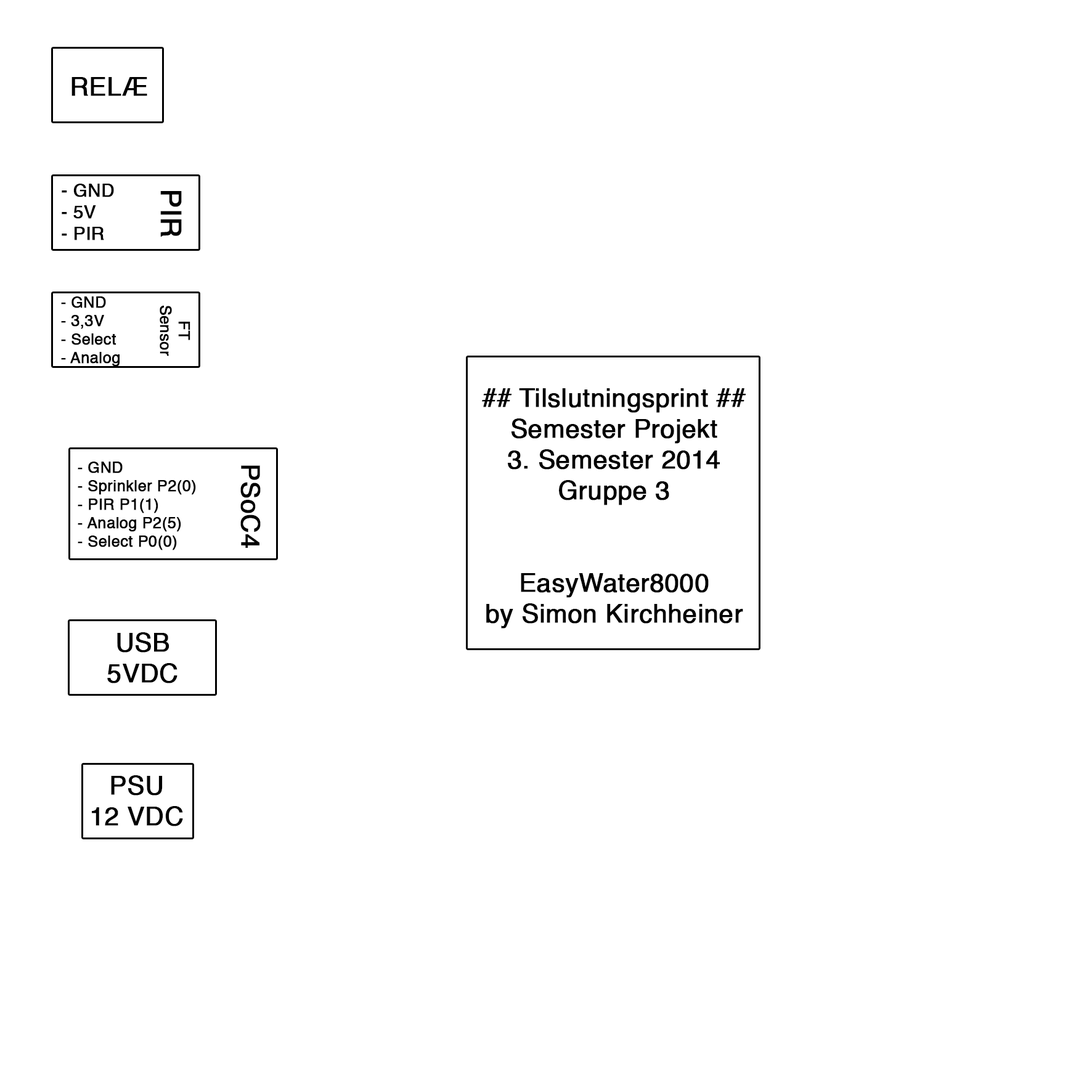
<style>
.page{position:relative;width:1092px;height:1092px;background:#ffffff}
.page>*{position:absolute;margin:0}
.t1{font:25.7px "Helvetica";color:#000000;font-weight:bold}
.t2{font:18px "Helvetica";color:#000000;font-weight:bold}
.t3{font:28.2px "Helvetica";color:#000000;font-weight:bold}
.t4{font:15.4px "Helvetica";color:#000000;font-weight:bold}
</style>
<div class="page">
<p class="t1" style="left:71px;top:77px;width:76px;height:19px">RELÆ</p>
<p class="t2" style="left:62px;top:184px;width:52px;height:56px">- GND<br>- 5V<br>- PIR</p>
<p class="t3" style="left:160px;top:191px;width:22px;height:46px;rotate:90deg">PIR</p>
<p class="t4" style="left:61px;top:296px;width:59px;height:71px">- GND<br>- 3,3V<br>- Select<br>- Analog</p>
<p class="t4" style="left:160px;top:306px;width:30px;height:50px;text-align:center;rotate:90deg">FT<br>Sensor</p>
<p class="t1" style="left:482px;top:388px;width:264px;height:241px;text-align:center">## Tilslutningsprint ##<br>Semester Projekt<br>3. Semester 2014<br>Gruppe 3<br><br><br>EasyWater8000<br>by Simon Kirchheiner</p>
<p class="t4" style="left:78px;top:462px;width:118px;height:88px">- GND<br>- Sprinkler P2(0)<br>- PIR P1(1)<br>- Analog P2(5)<br>- Select P0(0)</p>
<p class="t1" style="left:240px;top:465px;width:21px;height:83px;rotate:90deg">PSoC4</p>
<p class="t1" style="left:107px;top:632px;width:70px;height:51px;text-align:center">USB<br>5VDC</p>
<p class="t1" style="left:92px;top:775px;width:91px;height:51px;text-align:center">PSU<br>12 VDC</p>
</div>
